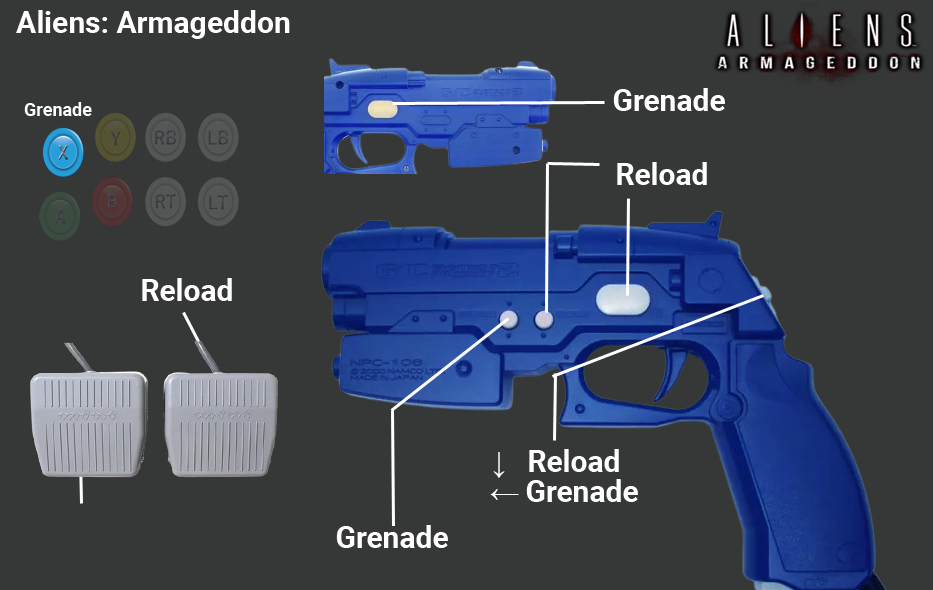
<style>
.page{position:relative;width:933px;height:590px;background:#363838}
.page>*{position:absolute;margin:0}
.t1{font:30px "Roboto-Bold";color:#ffffff}
.t2{font:18px "Roboto-Bold";color:#ffffff}
.t3{font:30px "MicrosoftSansSerif";color:#ffffff}
</style>
<div class="page">
<p class="t1" style="left:16px;top:10px;width:274px;height:29px">Aliens: Armageddon</p>
<p class="t1" style="left:613px;top:88px;width:112px;height:23px">Grenade</p>
<p class="t2" style="left:24px;top:102px;width:68px;height:14px">Grenade</p>
<p class="t1" style="left:617px;top:162px;width:90px;height:23px">Reload</p>
<p class="t1" style="left:142px;top:278px;width:90px;height:23px">Reload</p>
<p class="t1" style="left:493px;top:449px;width:126px;height:29px"><span class="t3">↓ </span>Reload</p>
<p class="t1" style="left:490px;top:479px;width:148px;height:23px"><span class="t3">← </span>Grenade</p>
<p class="t1" style="left:336px;top:525px;width:112px;height:23px">Grenade</p>
</div>
